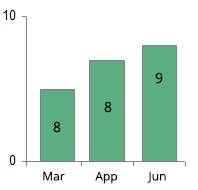
<style>
.page{position:relative;width:198px;height:190px;background:#ffffff}
.page>*{position:absolute;margin:0}
.t1{font:14px "OpenSans";color:#000000}
.t2{font:14px "OpenSans"}
.t3{font:12px "OpenSans";color:#000000}
</style>
<div class="page">
<p class="t1" style="left:155px;top:72px;width:8px;height:12px">9</p>
<p class="t2" style="left:52px;top:89px;width:8px;height:10px">7</p>
<p class="t1" style="left:104px;top:101px;width:8px;height:12px">8</p>
<p class="t1" style="left:53px;top:121px;width:8px;height:12px">8</p>
<p class="t3" style="left:43px;top:171px;width:22px;height:10px">Mar</p>
<p class="t3" style="left:95px;top:171px;width:22px;height:13px">App</p>
<p class="t3" style="left:147px;top:171px;width:19px;height:12px">Jun</p>
</div>
